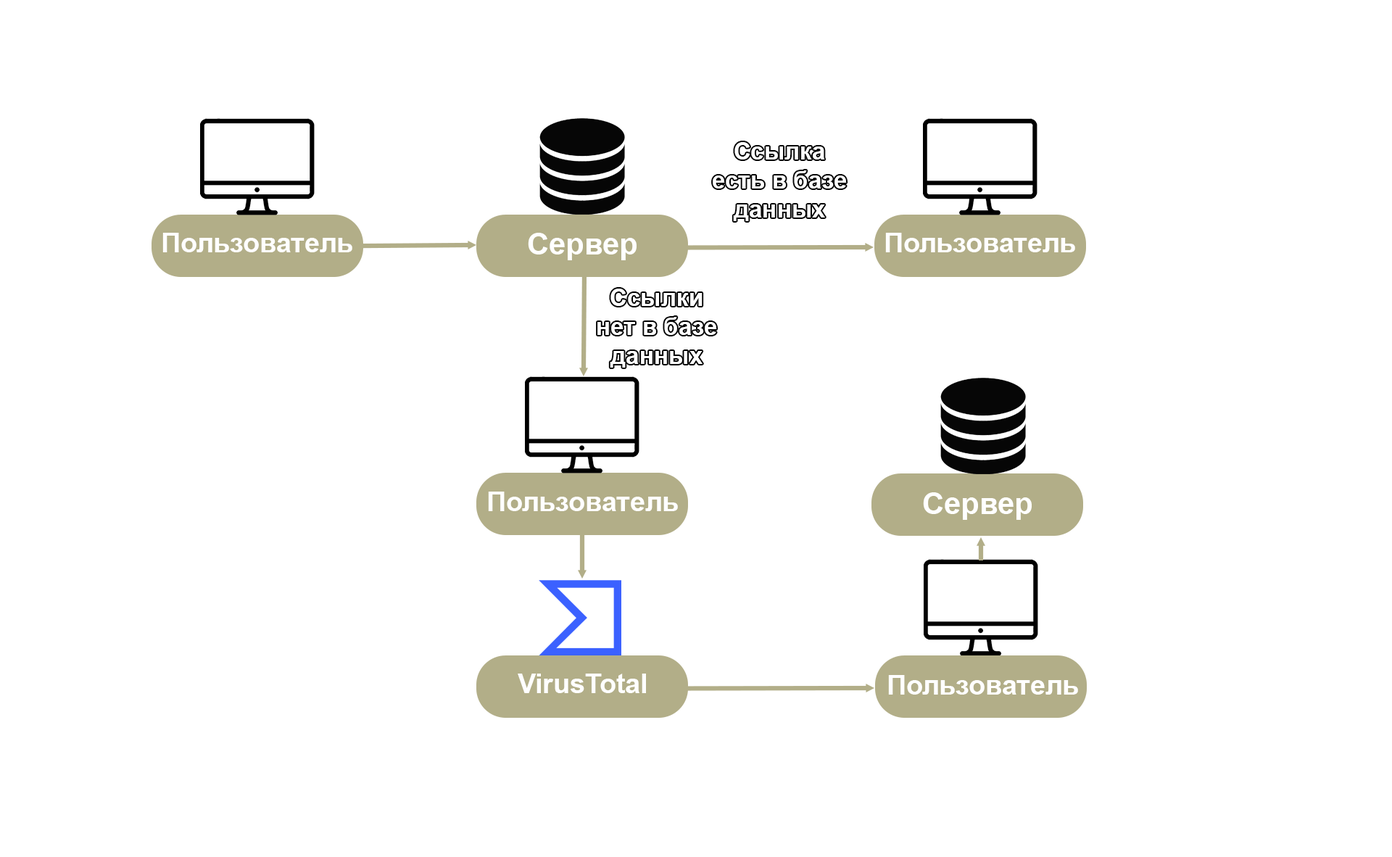
<style>
.page{position:relative;width:1392px;height:857px;background:#ffffff}
.page>*{position:absolute;margin:0}
.t1{font:27.2px "Arial-BoldMT";color:#ffffff}
.t2{font:30.2px "Arial-BoldMT";color:#ffffff}
</style>
<div class="page">
<p class="t1" style="left:162px;top:233px;width:190px;height:19px">Пользователь</p>
<p class="t2" style="left:528px;top:233px;width:108px;height:27px">Сервер</p>
<p class="t1" style="left:885px;top:233px;width:190px;height:19px">Пользователь</p>
<p class="t1" style="left:488px;top:491px;width:190px;height:20px">Пользователь</p>
<p class="t2" style="left:923px;top:492px;width:108px;height:28px">Сервер</p>
<p class="t1" style="left:518px;top:673px;width:128px;height:20px">VirusTotal</p>
<p class="t1" style="left:888px;top:675px;width:190px;height:19px">Пользователь</p>
</div>
